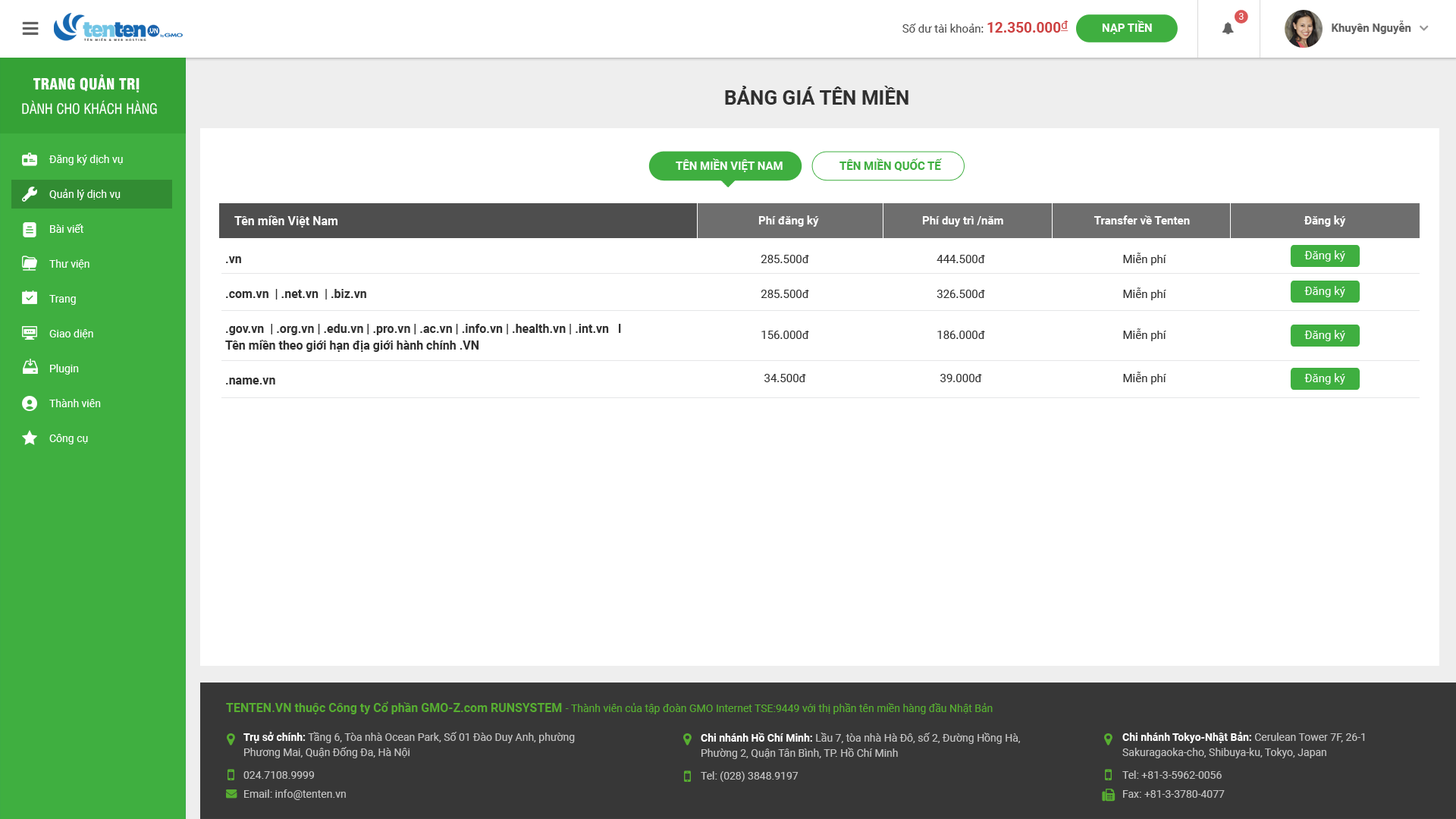
<style>
.page{position:relative;width:1456px;height:819px;background:#ffffff}
.page>*{position:absolute;margin:0}
.t1{font:9.1px "Roboto-Regular";color:#ffffff;text-transform:uppercase}
.t2{font:11.4px "Roboto-Regular";color:#4e4e4e}
.t3{font:14.4px "Roboto-Bold";color:#cd4141}
.t4{font:11.4px "Roboto-Regular";color:#cd4141;text-decoration:underline}
.t5{font:11.4px "Roboto-Bold";color:#ffffff}
.t6{font:11.4px "Roboto-Bold";color:#616161}
.t7{font:15.2px "UTM-Swiss-721-Black-Condensed";color:#ffffff;text-transform:uppercase}
.t8{font:19.7px "Roboto-Bold";color:#303030;text-transform:uppercase}
.t9{font:13.6px "UTM-Swiss-Condensed";color:#ffffff;text-transform:uppercase}
.t10{font:10.6px/34.9px "Roboto-Regular";color:#ffffff}
.t11{font:12.1px "Roboto-Bold";color:#ffffff}
.t12{font:12.1px/34.9px "Roboto-Bold";color:#303030}
.t13{font:12.1px/16.7px "Roboto-Bold";color:#303030}
.t14{font:11.4px/34.9px "Roboto-Regular";color:#303030}
.t15{font:11.4px/40.9px "Roboto-Regular";color:#303030}
.t16{font:11.4px/43.2px "Roboto-Regular";color:#303030}
.t17{font:11.4px "Roboto-Regular";color:#ffffff}
.t18{font:10.6px "Roboto-Regular";color:#57ae31}
.t19{font:12.1px "Roboto-Bold";color:#57ae31}
.t20{font:10.6px/15.2px "Roboto-Regular";color:#c4c4c4}
.t21{font:10.6px/15.2px "Roboto-Bold";color:#ffffff}
.t22{font:10.6px/22.7px "Roboto-Regular";color:#c4c4c4}
.t23{font:10.6px/19px "Roboto-Regular";color:#c4c4c4}
</style>
<div class="page">
<p class="t1" style="left:1238px;top:13px;width:6px;height:7px">3</p>
<p class="t2" style="left:902px;top:20px;width:166px;height:13px">Số dư tài khoản: <span class="t3">12.350.000</span><span class="t4">đ</span></p>
<p class="t5" style="left:1102px;top:20px;width:50px;height:14px">NẠP TIỀN</p>
<p class="t6" style="left:1332px;top:20px;width:79px;height:14px">Khuyên Nguyễn</p>
<p class="t7" style="left:33px;top:74px;width:107px;height:19px">Trang quản trị</p>
<p class="t8" style="left:725px;top:86px;width:183px;height:19px">bảng giá tên miền</p>
<p class="t9" style="left:22px;top:100px;width:135px;height:15px">Dành cho Khách hàng</p>
<p class="t10" style="left:49px;top:155px;width:74px;height:289px">Đăng ký dịch vụ<br>Quản lý dịch vụ<br>Bài viết<br>Thư viện<br>Trang<br>Giao diện<br>Plugin<br>Thành viên<br>Công cụ</p>
<p class="t11" style="left:234px;top:215px;width:103px;height:12px">Tên miền Việt Nam</p>
<p class="t5" style="left:758px;top:215px;width:588px;height:12px">Phí đăng ký    Phí duy trì /năm       Transfer về Tenten       Đăng ký</p>
<p class="t12" style="left:225px;top:256px;width:396px;height:128px">.vn<br>.com.vn  | .net.vn  | .biz.vn<br>.gov.vn  | .org.vn | .edu.vn | .pro.vn | .ac.vn | .info.vn | .health.vn | .int.vn   l  <br><span class="t13">Tên miền theo giới hạn địa giới hành chính .VN<br></span>.name.vn</p>
<p class="t14" style="left:761px;top:255px;width:48px;height:127px;text-align:center">285.500đ<br>285.500đ<br><span class="t15">156.000đ<br></span><span class="t16">34.500đ</span></p>
<p class="t14" style="left:937px;top:255px;width:48px;height:127px;text-align:center">444.500đ<br>326.500đ<br><span class="t15">186.000đ<br></span><span class="t16">39.000đ</span></p>
<p class="t14" style="left:1123px;top:253px;width:43px;height:131px;text-align:center">Miễn phí<br>Miễn phí<br><span class="t15">Miễn phí<br></span><span class="t16">Miễn phí</span></p>
<p class="t17" style="left:1304px;top:250px;width:41px;height:12px">Đăng ký</p>
<p class="t18" style="left:226px;top:701px;width:767px;height:13px"><span class="t19">TENTEN.VN thuộc Công ty Cổ phần GMO-Z.com RUNSYSTEM </span>- Thành viên của tập đoàn GMO Internet TSE:9449 với thị phần tên miền hàng đầu Nhật Bản</p>
<p class="t20" style="left:243px;top:732px;width:332px;height:68px"><span class="t21">Trụ sở chính:</span> Tầng 6, Tòa nhà Ocean Park, Số 01 Đào Duy Anh, phường Phương Mai, Quận Đống Đa, Hà Nội<br><span class="t22">024.7108.9999<br></span><span class="t23">Email: info@tenten.vn</span></p>
<p class="t20" style="left:701px;top:733px;width:319px;height:49px"><span class="t21">Chi nhánh Hồ Chí Minh: </span>Lầu 7, tòa nhà Hà Đô, số 2, Đường Hồng Hà, Phường 2, Quận Tân Bình, TP. Hồ Chí Minh<br><span class="t22">Tel: (028) 3848.9197</span></p>
<p class="t20" style="left:1122px;top:732px;width:243px;height:66px"><span class="t21">Chi nhánh Tokyo-Nhật Bản:</span> Cerulean Tower 7F, 26-1 Sakuragaoka-cho, Shibuya-ku, Tokyo, Japan <br><span class="t22">Tel: +81-3-5962-0056<br></span><span class="t23">Fax: +81-3-3780-4077</span></p>
</div>
